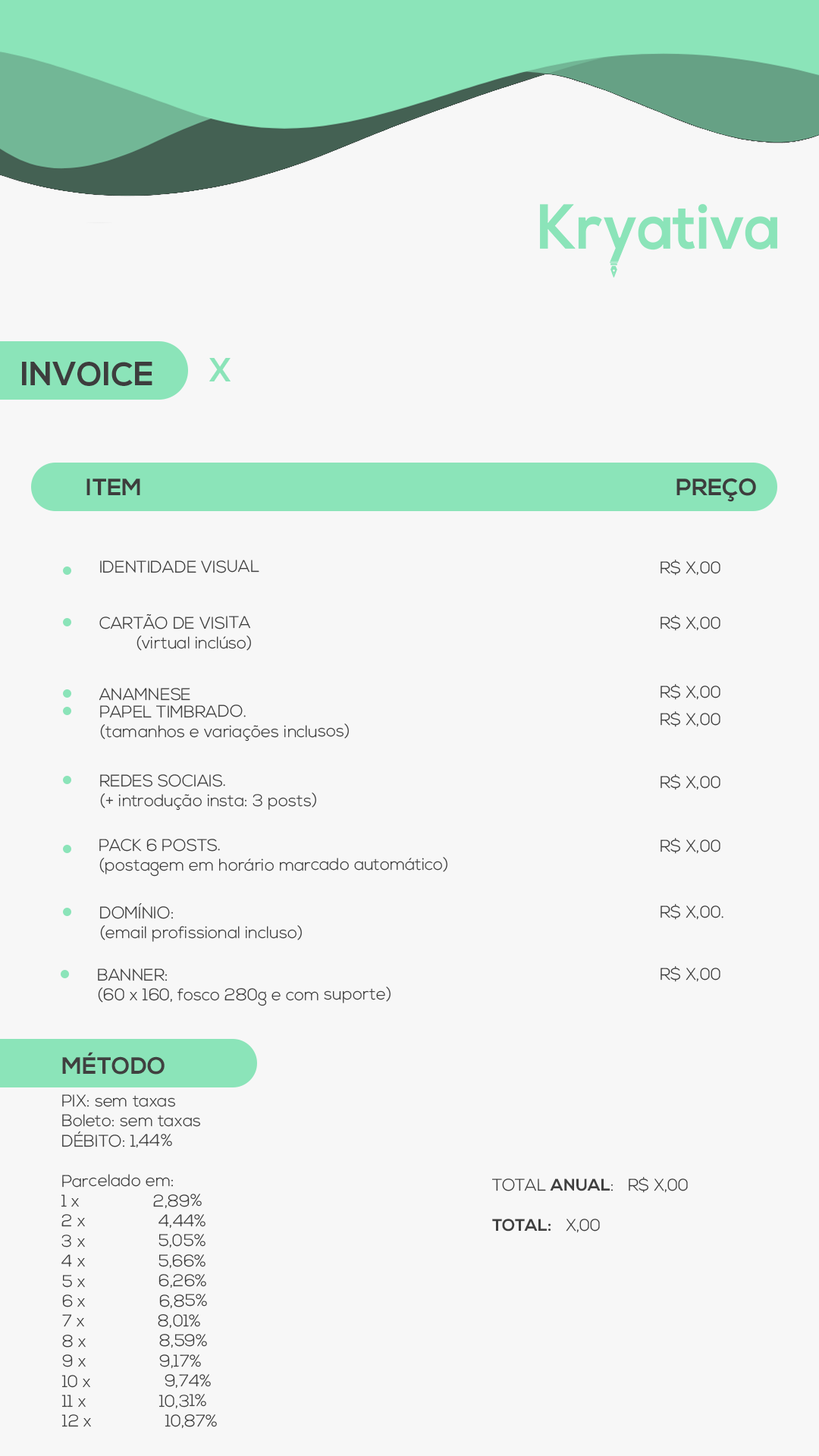
<style>
.page{position:relative;width:819px;height:1456px;background:#f7f7f7}
.page>*{position:absolute;margin:0}
.t1{font:32.6px "NexaBold";color:#3d3d3d}
.t2{font:32.6px "NexaBold";color:#8be4b9}
.t3{font:23.5px "NexaBold";color:#3d3d3d}
.t4{font:16.7px "NexaLight";color:#404040}
.t5{font:23.5px "NexaBold";color:#404040}
.t6{font:16.7px "NexaBold";color:#404040}
</style>
<div class="page">
<p class="t1" style="left:22px;top:362px;width:130px;height:24px">INVOICE</p>
<p class="t2" style="left:209px;top:358px;width:22px;height:23px">X</p>
<p class="t3" style="left:86px;top:479px;width:54px;height:16px">ITEM</p>
<p class="t3" style="left:676px;top:478px;width:80px;height:24px">PREÇO</p>
<p class="t4" style="left:100px;top:560px;width:159px;height:13px">IDENTIDADE VISUAL</p>
<p class="t4" style="left:660px;top:560px;width:60px;height:16px">R$ X,00</p>
<p class="t4" style="left:99px;top:613px;width:152px;height:38px">CARTÃO DE VISITA<br>   (virtual inclúso)</p>
<p class="t4" style="left:660px;top:615px;width:60px;height:16px">R$ X,00</p>
<p class="t4" style="left:99px;top:688px;width:91px;height:13px">ANAMNESE</p>
<p class="t4" style="left:660px;top:684px;width:60px;height:16px">R$ X,00</p>
<p class="t4" style="left:100px;top:704px;width:249px;height:37px">PAPEL TIMBRADO. <br>(tamanhos e variações inclusos)</p>
<p class="t4" style="left:660px;top:711px;width:60px;height:16px">R$ X,00</p>
<p class="t4" style="left:100px;top:774px;width:216px;height:36px">REDES SOCIAIS.<br>(+ introdução insta: 3 posts)</p>
<p class="t4" style="left:660px;top:774px;width:60px;height:16px">R$ X,00</p>
<p class="t4" style="left:99px;top:839px;width:348px;height:38px">PACK 6 POSTS. <br>(postagem em horário marcado automático)</p>
<p class="t4" style="left:660px;top:838px;width:60px;height:16px">R$ X,00</p>
<p class="t4" style="left:100px;top:903px;width:202px;height:39px">DOMÍNIO: <br>(email profissional incluso)</p>
<p class="t4" style="left:660px;top:904px;width:63px;height:16px">R$ X,00.</p>
<p class="t4" style="left:98px;top:968px;width:293px;height:38px">BANNER:<br>(60 x 160, fosco 280g e com suporte)</p>
<p class="t4" style="left:660px;top:966px;width:60px;height:16px">R$ X,00</p>
<p class="t5" style="left:62px;top:1052px;width:103px;height:23px">MÉTODO</p>
<p class="t4" style="left:61px;top:1094px;width:156px;height:335px">PIX: sem taxas<br>Boleto: sem taxas<br>DÉBITO: 1,44%<br><br>Parcelado em:<br>1 x                2,89%<br>2 x                4,44%<br>3 x                5,05%<br>4 x                5,66%<br>5 x                6,26%<br>6 x                6,85%<br>7 x                8,01%<br>8 x                8,59%<br>9 x                9,17%<br>10 x                9,74%<br>11 x                10,31%<br>12 x                10,87%</p>
<p class="t4" style="left:492px;top:1177px;width:196px;height:56px">TOTAL <span class="t6">ANUAL</span>:   R$ X,00<br><br><span class="t6">TOTAL:</span>   X,00</p>
</div>
